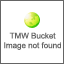
<style>
.page{position:relative;width:64px;height:64px;background:#ffffff}
.page>*{position:absolute;margin:0}
.t1{font:8px "ArialMT";color:#636363}
</style>
<div class="page">
<p class="t1" style="left:4px;top:32px;width:57px;height:18px;text-align:center">TMW Bucket<br>Image not found</p>
</div>
